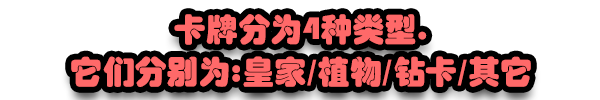
<style>
.page{position:relative;width:600px;height:100px;background:#ffffff}
.page>*{position:absolute;margin:0}
.t1{font:32.1px/42.3px "STHupo";color:#ff6969}
</style>
<div class="page">
<p class="t1" style="left:71px;top:14px;width:460px;height:73px;text-align:center">卡牌分为4种类型.<br>它们分别为:皇家/植物/钻卡/其它</p>
</div>
